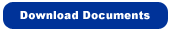
<style>
.page{position:relative;width:171px;height:31px;background:#003399}
.page>*{position:absolute;margin:0}
.t1{font:11px "Arial-Black";color:#ffffff}
</style>
<div class="page">
<p class="t1" style="left:20px;top:11px;width:130px;height:9px">Download Documents</p>
</div>
